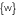
<style>
.page{position:relative;width:16px;height:16px;background:#ffffff}
.page>*{position:absolute;margin:0}
.t1{font:14px "HelveticaNeue-UltraLight"}
.t2{font:10px "HelveticaNeue-UltraLight"}
</style>
<div class="page">
<p class="t1" style="left:0px;top:2px;width:16px;height:13px">{     }</p>
<p class="t2" style="left:4px;top:6px;width:8px;height:5px">w</p>
</div>
